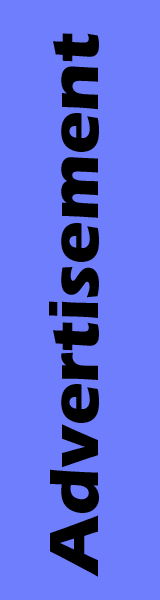
<style>
.page{position:relative;width:160px;height:600px;background:#6e7efc}
.page>*{position:absolute;margin:0}
.t1{font:72px "ErasITC-Bold";color:#000000}
</style>
<div class="page">
<p class="t1" style="left:49px;top:33px;width:50px;height:544px;rotate:-90deg">Advertisement</p>
</div>
